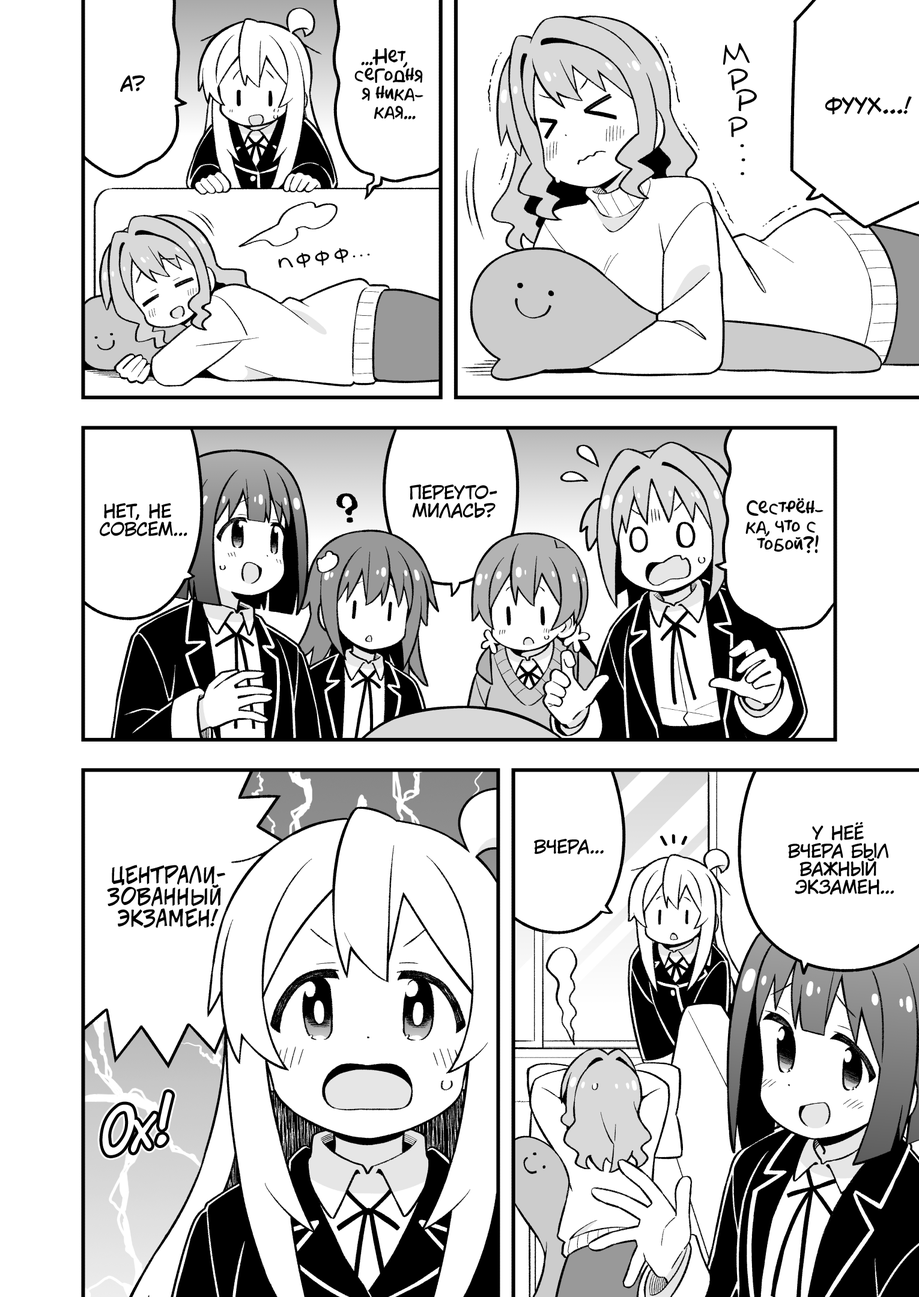
<style>
.page{position:relative;width:919px;height:1297px;background:#ffffff}
.page>*{position:absolute;margin:0}
.t1{font:18px "AkbarPlain";color:#000000}
.t2{font:28.8px "v_Augie";color:#000000;text-transform:uppercase}
.t3{font:19.8px "KuraiVoice2";color:#000000;text-transform:uppercase}
.t4{font:27.6px "v_Augie";color:#000000;text-transform:uppercase}
.t5{font:21.6px "v_CCJeffCampbell";color:#000000;text-transform:uppercase}
.t6{font:26.4px "v_Augie";color:#000000;text-transform:uppercase}
.t7{font:21.6px "v_Augie";color:#000000}
.t8{font:18px "v_Augie";color:#000000}
.t9{font:18px "KuraiVoice2";color:#000000;text-transform:uppercase}
.t10{font:57.7px "v_CCDearDiary";color:#ffffff}
</style>
<div class="page">
<p class="t1" style="left:354px;top:48px;width:69px;height:72px;text-align:center">...Нет,<br>сегодня<br>я ника-<br>кая...</p>
<p class="t2" style="left:723px;top:43px;width:27px;height:22px;rotate:-10deg">м</p>
<p class="t3" style="left:120px;top:75px;width:25px;height:17px">А?</p>
<p class="t4" style="left:727px;top:68px;width:21px;height:23px;rotate:-6deg">р</p>
<p class="t2" style="left:736px;top:89px;width:21px;height:22px;rotate:2deg">р</p>
<p class="t5" style="left:825px;top:96px;width:87px;height:19px">Фуух...!</p>
<p class="t6" style="left:728px;top:117px;width:20px;height:21px;rotate:-1deg">р</p>
<p class="t2" style="left:740px;top:144px;width:4px;height:3px">.</p>
<p class="t2" style="left:741px;top:158px;width:4px;height:4px">.</p>
<p class="t2" style="left:741px;top:172px;width:3px;height:3px">.</p>
<p class="t7" style="left:278px;top:258px;width:15px;height:10px;rotate:-10deg">п</p>
<p class="t7" style="left:296px;top:253px;width:15px;height:15px;rotate:-11deg">ф</p>
<p class="t7" style="left:315px;top:250px;width:14px;height:16px;rotate:-5deg">ф</p>
<p class="t7" style="left:335px;top:248px;width:13px;height:16px;rotate:-12deg">ф</p>
<p class="t8" style="left:353px;top:255px;width:3px;height:3px">.</p>
<p class="t8" style="left:360px;top:255px;width:3px;height:1px">.</p>
<p class="t8" style="left:367px;top:253px;width:3px;height:3px">.</p>
<p class="t9" style="left:410px;top:484px;width:87px;height:34px;text-align:center">Переуто-<br>милась?</p>
<p class="t1" style="left:745px;top:498px;width:79px;height:56px;text-align:center">Сестрён-<br>ка, что с<br>тобой?!</p>
<p class="t9" style="left:100px;top:503px;width:87px;height:34px;text-align:center">Нет, не<br>совсем...</p>
<p class="t9" style="left:788px;top:822px;width:106px;height:73px;text-align:center">У неё<br>вчера был<br>важный<br>экзамен...</p>
<p class="t9" style="left:534px;top:839px;width:70px;height:16px">Вчера...</p>
<p class="t5" style="left:107px;top:865px;width:118px;height:64px;text-align:center">Централи-<br>зованный<br>Экзамен!</p>
<p class="t10" style="left:102px;top:1093px;width:70px;height:63px;rotate:-11deg">Ох!</p>
</div>
